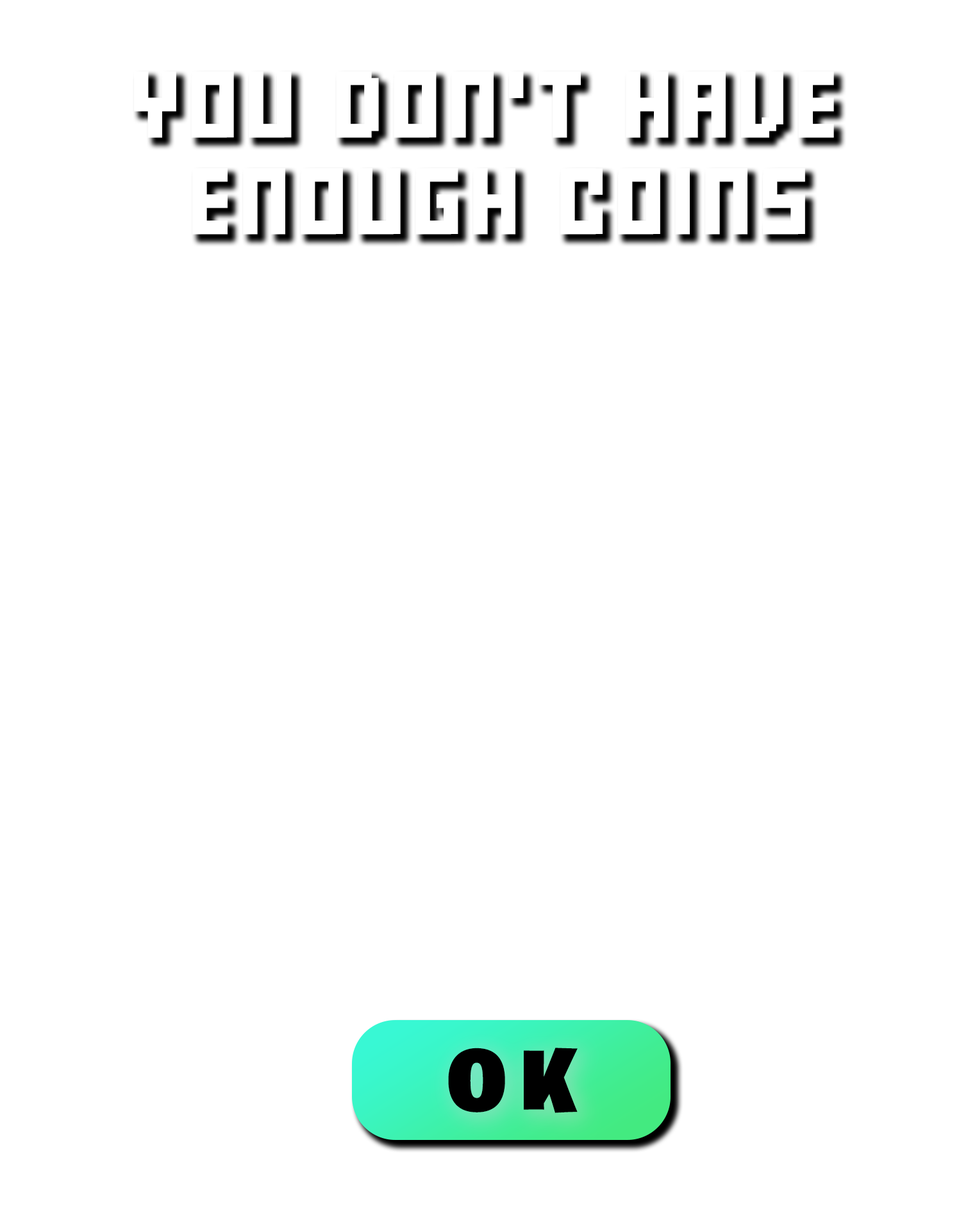
<style>
.page{position:relative;width:968px;height:1231px;background:#ffffff}
.page>*{position:absolute;margin:0}
.t1{font:52.5px/96.7px "FFFForward";letter-spacing:0.16em;color:#ffffff;text-transform:uppercase;scale:1.06 1}
.t2{font:87.9px "BurbankBigRegular-Black";letter-spacing:0.16em;color:#000000;text-transform:uppercase;scale:1.06 1}
</style>
<div class="page">
<p class="t1" style="left:134px;top:71px;width:700px;height:164px;text-align:center">you don't have<br> enough coins</p>
<p class="t2" style="left:448px;top:1048px;width:130px;height:65px">ok</p>
</div>
